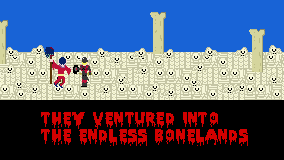
<style>
.page{position:relative;width:284px;height:160px;background:#000000}
.page>*{position:absolute;margin:0}
.t1{font:14px "PiecesNFI";letter-spacing:0.06em;color:#d20000}
</style>
<div class="page">
<p class="t1" style="left:41px;top:112px;width:207px;height:34px">They ventured into<br>the endless bonelands</p>
</div>
